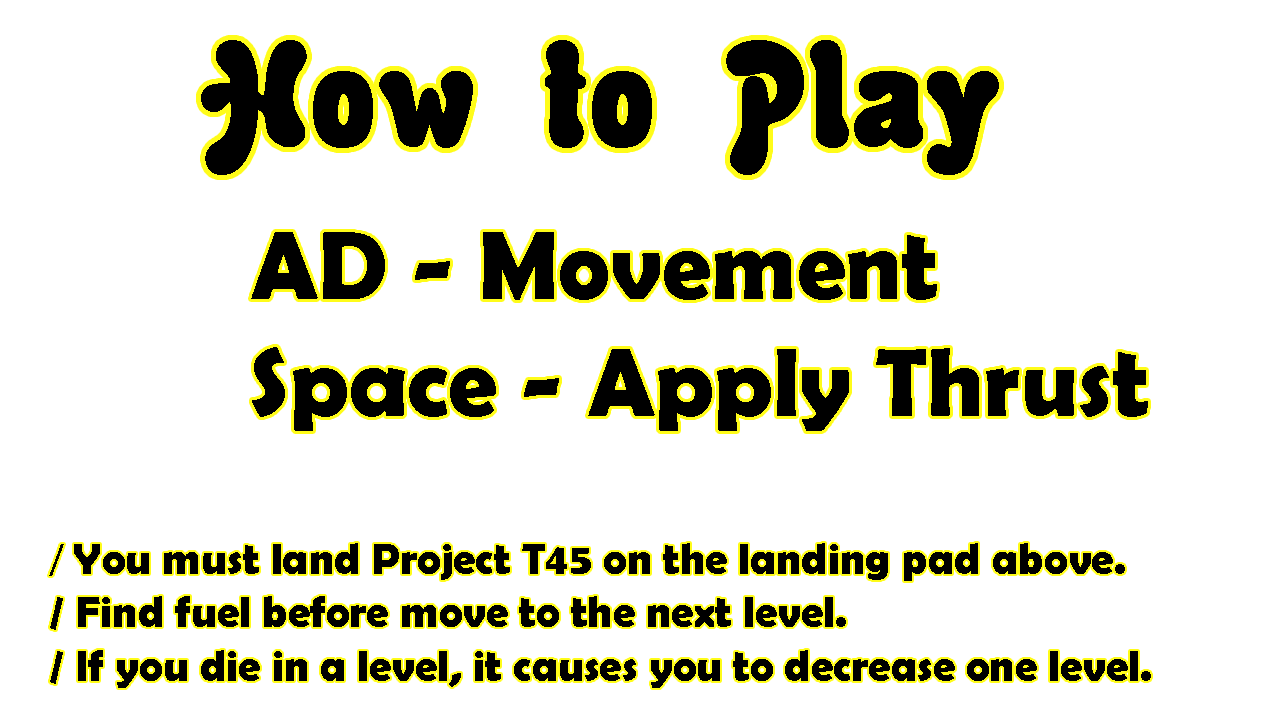
<style>
.page{position:relative;width:1280px;height:720px;background:#ffffff}
.page>*{position:absolute;margin:0}
.t1{font:142.2px "Rounded-Informal";color:#000000}
.t2{font:97.8px "BerlinSansFBDemi-Bold";color:#000000}
.t3{font:44.4px "BerlinSansFBDemi-Bold";color:#000000}
.t4{font:44.4px "MyriadPro-Regular";color:#000000}
</style>
<div class="page">
<p class="t1" style="left:201px;top:40px;width:798px;height:135px">How to Play</p>
<p class="t2" style="left:251px;top:232px;width:897px;height:199px">AD - Movement<br>Space - Apply Thrust</p>
<p class="t3" style="left:49px;top:543px;width:1102px;height:145px"><span class="t4">/ </span>You must land Project T45 on the landing pad above. <br>/ Find fuel before move to the next level.<br>/ If you die in a level, it causes you to decrease one level.</p>
</div>
